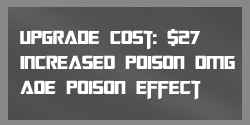
<style>
.page{position:relative;width:250px;height:125px}
.page>*{position:absolute;margin:0}
.t1{font:21px "TransformersMovie";color:#ffffff}
</style>
<div class="page">
<p class="t1" style="left:20px;top:29px;width:215px;height:71px">upgrade cost: $27<br>Increased poison dmg<br>Aoe poison effect</p>
</div>
